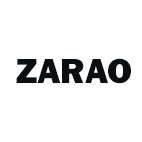
<style>
.page{position:relative;width:142px;height:142px;background:#ffffff}
.page>*{position:absolute;margin:0}
.t1{font:36px "FranklinGothic-Heavy";color:#0c0f12}
</style>
<div class="page">
<p class="t1" style="left:16px;top:58px;width:115px;height:26px">ZARAO</p>
</div>
